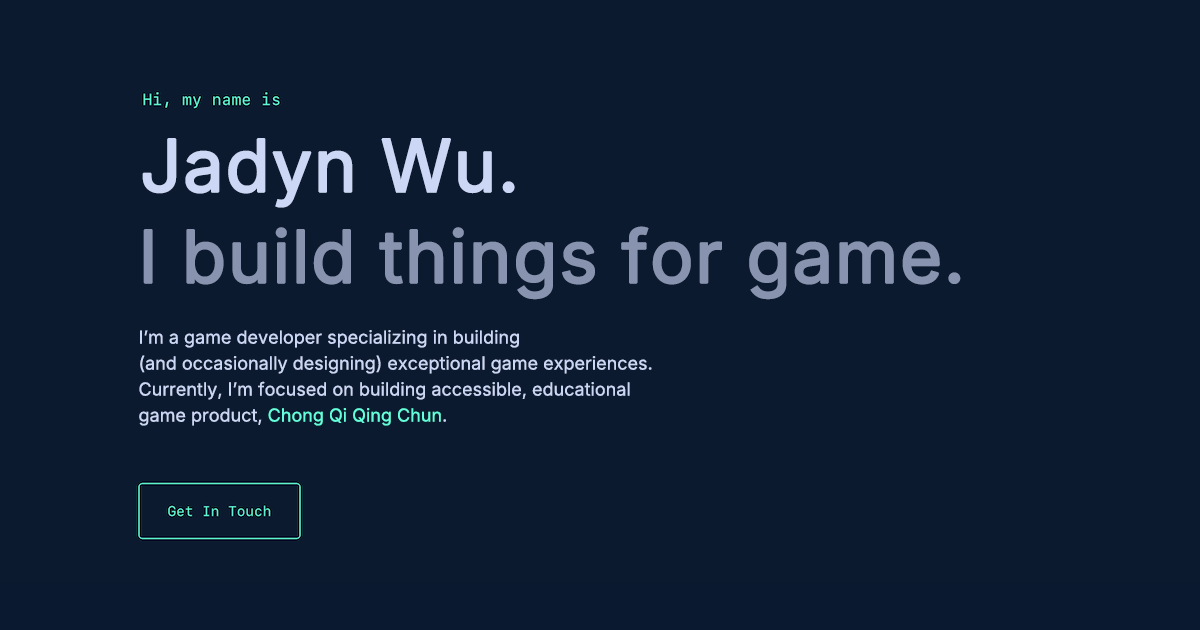
<style>
.page{position:relative;width:1200px;height:630px;background:#0b1a2e}
.page>*{position:absolute;margin:0}
.t1{font:72px "Inter-Regular";color:#ccd7f5;font-weight:bold}
.t2{font:72px "Inter-Regular";color:#8893af;font-weight:bold}
.t3{font:18px/26px "Inter-Regular";color:#ccd7f5}
.t4{font:18px/26px "Inter-Regular";color:#64ffda}
</style>
<div class="page">
<p class="t1" style="left:142px;top:138px;width:373px;height:70px">Jadyn Wu.</p>
<p class="t2" style="left:143px;top:226px;width:818px;height:74px">I build things for game.</p>
<p class="t3" style="left:139px;top:330px;width:513px;height:96px">I’m a game developer specializing in building<br>(and occasionally designing) exceptional game experiences. Currently, I’m focused on building accessible, educational game product, <span class="t4">Chong Qi Qing Chun</span>.</p>
</div>
